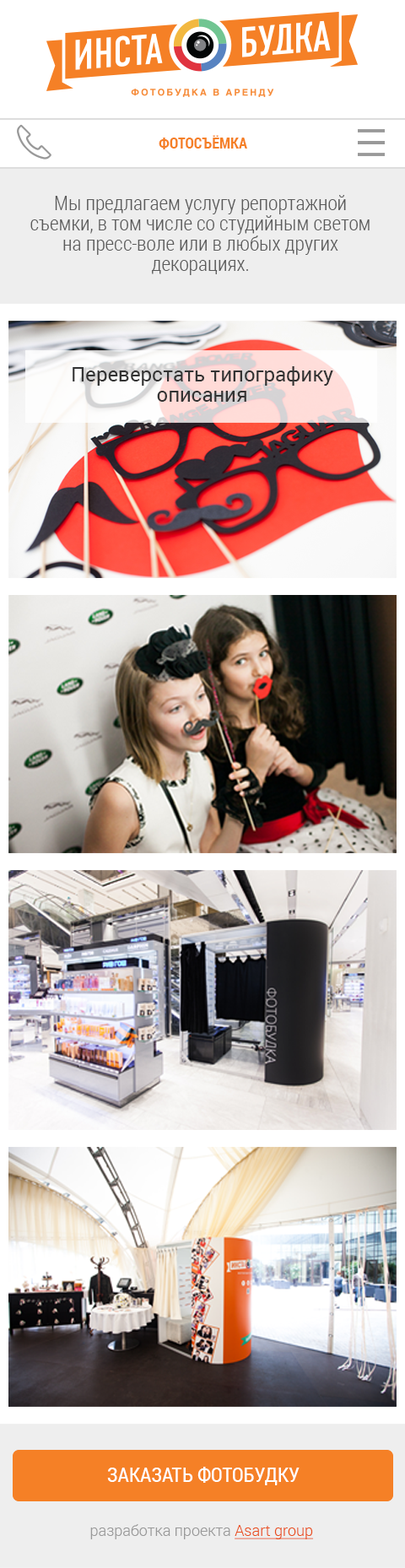
<style>
.page{position:relative;width:405px;height:1568px}
.page>*{position:absolute;margin:0}
.t1{font:15.2px "RobotoCondensed-Bold";color:#f58026;text-transform:uppercase}
.t2{font:20.3px/20.3px "RobotoCondensed-Light";color:#5a5a5a}
.t3{font:20.3px/20.3px "Roboto-Regular";color:#333333}
.t4{font:20.3px "RobotoCondensed-Regular";color:#ffffff;text-transform:uppercase}
.t5{font:15.2px "Roboto-Light";color:#999999}
.t6{font:15.2px "Roboto-Light";color:#e94e1b;text-decoration:underline}
</style>
<div class="page">
<p class="t1" style="left:159px;top:135px;width:88px;height:14px">фотосъёмка</p>
<p class="t2" style="left:30px;top:195px;width:340px;height:80px;text-align:center">Мы предлагаем услугу репортажной съемки, в том числе со студийным светом на пресс-воле или в любых других декорациях.</p>
<p class="t3" style="left:73px;top:366px;width:260px;height:36px;text-align:center">Переверстать типографику описания</p>
<p class="t4" style="left:107px;top:1467px;width:193px;height:18px">заказать фотобудку</p>
<p class="t5" style="left:90px;top:1524px;width:224px;height:15px">разработка проекта <span class="t6">Asart group</span></p>
</div>
